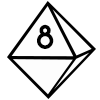
<style>
.page{position:relative;width:100px;height:100px;background:#ffffff}
.page>*{position:absolute;margin:0}
.t1{font:34.6px "QuicksandBold-Regular";color:#000000}
</style>
<div class="page">
<p class="t1" style="left:37px;top:24px;width:17px;height:25px">8</p>
</div>
